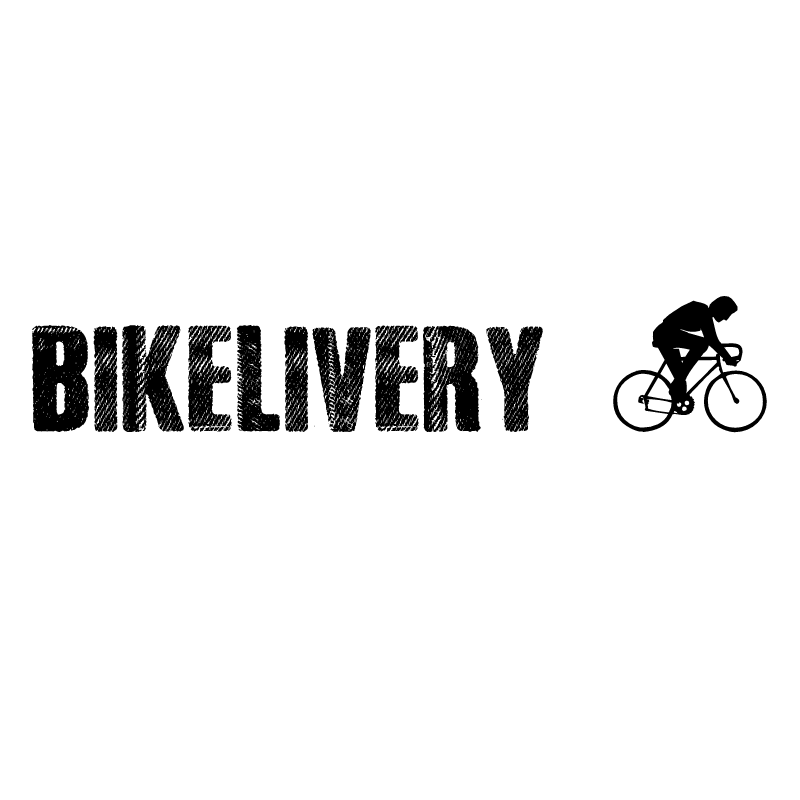
<style>
.page{position:relative;width:800px;height:800px;background:#ffffff}
.page>*{position:absolute;margin:0}
.t1{font:150px "Cycling";color:#000000}
.t2{font:150px "BlackJeans";color:#000000}
</style>
<div class="page">
<p class="t1" style="left:613px;top:296px;width:154px;height:137px;rotate:180deg">Q</p>
<p class="t2" style="left:32px;top:324px;width:511px;height:108px">BIKELIVERY</p>
</div>
